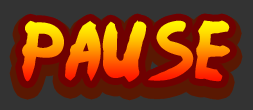
<style>
.page{position:relative;width:253px;height:110px;background:#333333}
.page>*{position:absolute;margin:0}
.t1{font:66.8px "Ninja-Naruto"}
</style>
<div class="page">
<p class="t1" style="left:22px;top:20px;width:208px;height:62px">PAUSE</p>
</div>
